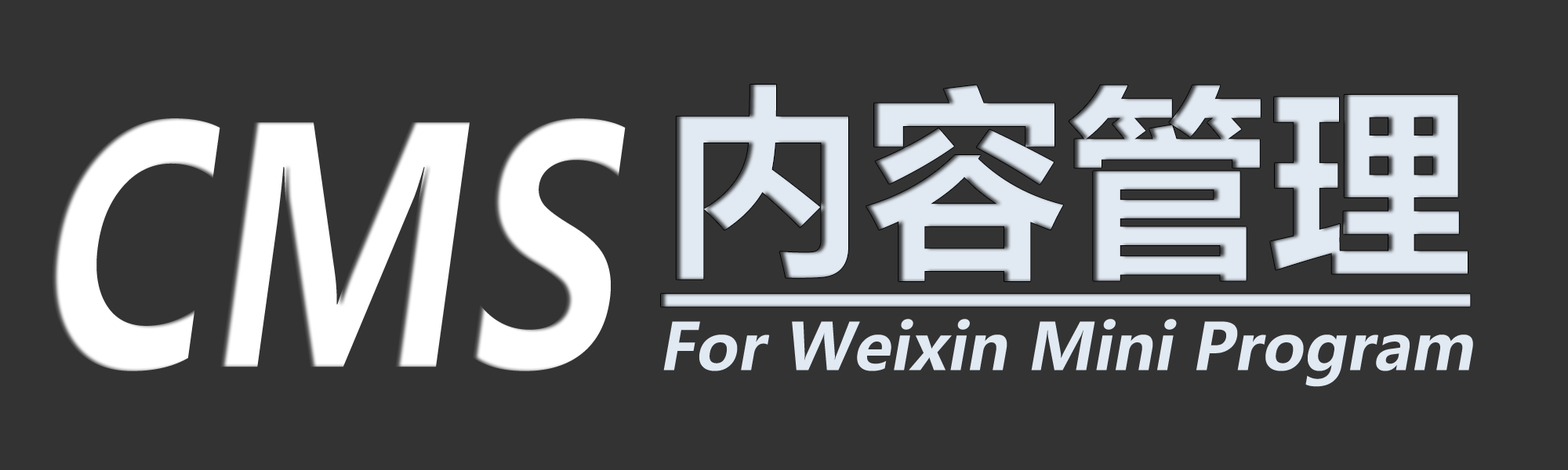
<style>
.page{position:relative;width:1568px;height:470px;background:#333333}
.page>*{position:absolute;margin:0}
.t1{font:202.3px "MicrosoftYaHei-Bold";color:#e1e9f2;text-decoration:underline}
.t2{font:323.3px "MicrosoftYaHei-Bold";color:#ffffff;font-style:italic;scale:0.78 1}
.t3{font:64.3px "MicrosoftYaHei-Bold";color:#e1e9f2;font-style:italic}
</style>
<div class="page">
<p class="t1" style="left:661px;top:85px;width:810px;height:222px">内容管理</p>
<p class="t2" style="left:52px;top:118px;width:574px;height:254px">CMS</p>
<p class="t3" style="left:663px;top:319px;width:810px;height:68px">For Weixin Mini Program</p>
</div>
